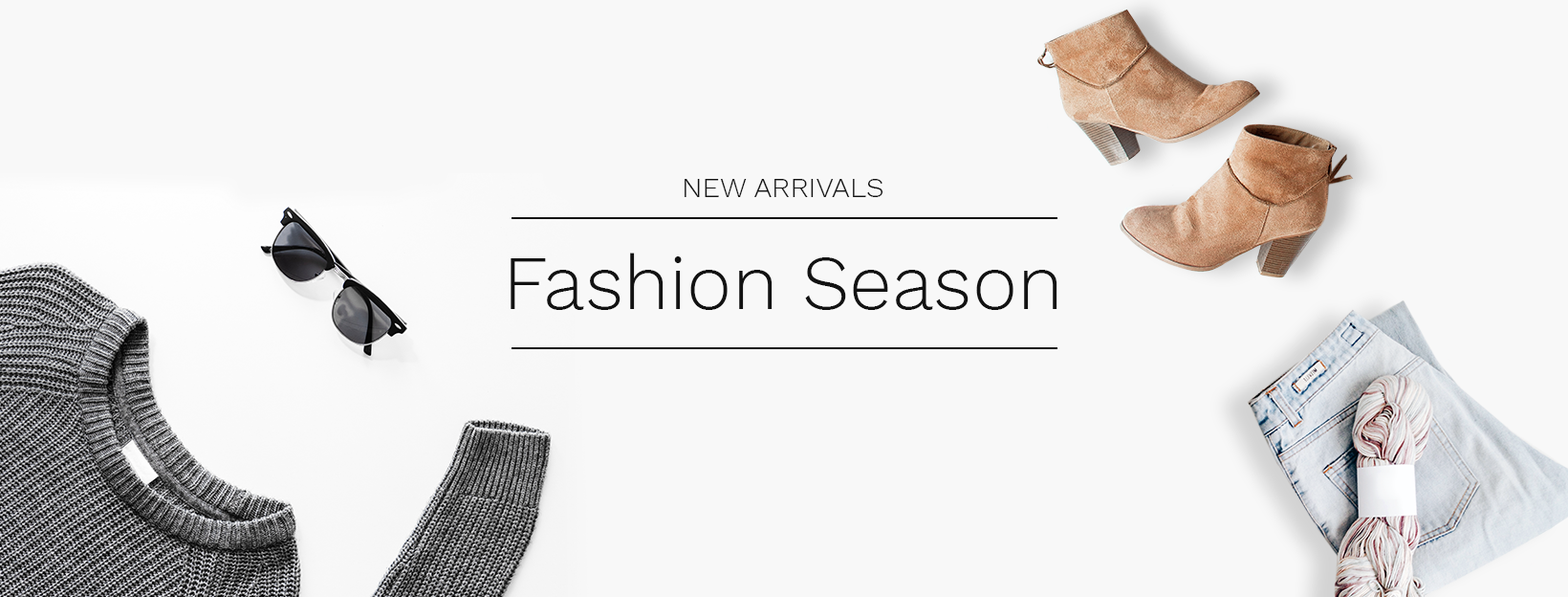
<style>
.page{position:relative;width:1568px;height:597px;background:#f8f8f8}
.page>*{position:absolute;margin:0}
.t1{font:28.7px "WorkSans-Light";color:#121212}
.t2{font:76.5px "WorkSans-Light";color:#121212}
</style>
<div class="page">
<p class="t1" style="left:685px;top:179px;width:198px;height:18px">NEW ARRIVALS</p>
<p class="t2" style="left:511px;top:252px;width:546px;height:58px">Fashion Season</p>
</div>
